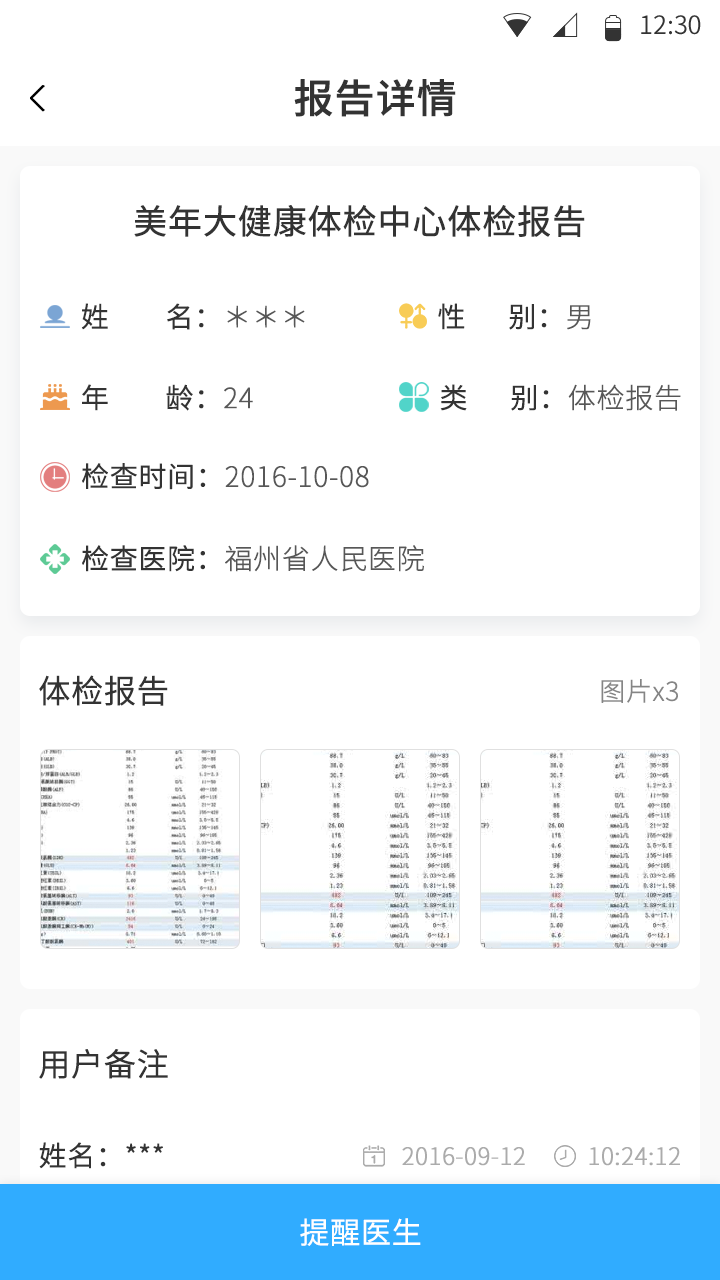
<style>
.page{position:relative;width:720px;height:1280px;background:#ffffff}
.page>*{position:absolute;margin:0}
.t1{font:25.4px "SourceHanSansCN-Normal";color:#333333}
.t2{font:40px "SourceHanSansCN-Medium";color:#333333;font-weight:bold}
.t3{font:34px "SourceHanSansCN-Regular";color:#333333;font-weight:bold}
.t4{font:28px "SourceHanSansCN-Normal";color:#333333;font-weight:bold}
.t5{font:28px "SourceHanSansCN-Light";color:#575757;font-weight:bold}
.t6{font:32px "SourceHanSansCN-Normal";color:#333333;font-weight:bold}
.t7{font:26px "SourceHanSansCN-Light";color:#858585;font-weight:bold}
.t8{font:24px "SourceHanSansCN-Light";color:#ababab;font-weight:bold}
.t9{font:30px "SourceHanSansCN-Normal";color:#ffffff;font-weight:bold}
</style>
<div class="page">
<p class="t1" style="left:641px;top:15px;width:60px;height:20px">12:30</p>
<p class="t2" style="left:294px;top:79px;width:162px;height:38px">报告详情</p>
<p class="t3" style="left:134px;top:205px;width:451px;height:32px">美年大健康体检中心体检报告</p>
<p class="t4" style="left:81px;top:303px;width:224px;height:27px">姓        名：<span class="t5">＊＊＊</span></p>
<p class="t4" style="left:438px;top:303px;width:153px;height:27px">性      别：<span class="t5">男</span></p>
<p class="t4" style="left:82px;top:384px;width:171px;height:27px">年        龄：<span class="t5">24</span></p>
<p class="t4" style="left:440px;top:384px;width:241px;height:27px">类      别：<span class="t5">体检报告</span></p>
<p class="t5" style="left:82px;top:463px;width:287px;height:27px"><span class="t4">检查时间：</span>2016-10-08</p>
<p class="t5" style="left:82px;top:545px;width:342px;height:27px"><span class="t4">检查医院：</span>福州省人民医院</p>
<p class="t6" style="left:39px;top:675px;width:129px;height:31px">体检报告</p>
<p class="t7" style="left:601px;top:679px;width:77px;height:24px">图片x3</p>
<p class="t6" style="left:39px;top:1049px;width:129px;height:30px">用户备注</p>
<p class="t4" style="left:39px;top:1142px;width:124px;height:27px">姓名：***</p>
<p class="t8" style="left:402px;top:1147px;width:123px;height:19px">2016-09-12</p>
<p class="t8" style="left:589px;top:1147px;width:91px;height:19px">10:24:12</p>
<p class="t9" style="left:300px;top:1218px;width:121px;height:28px">提醒医生</p>
</div>
